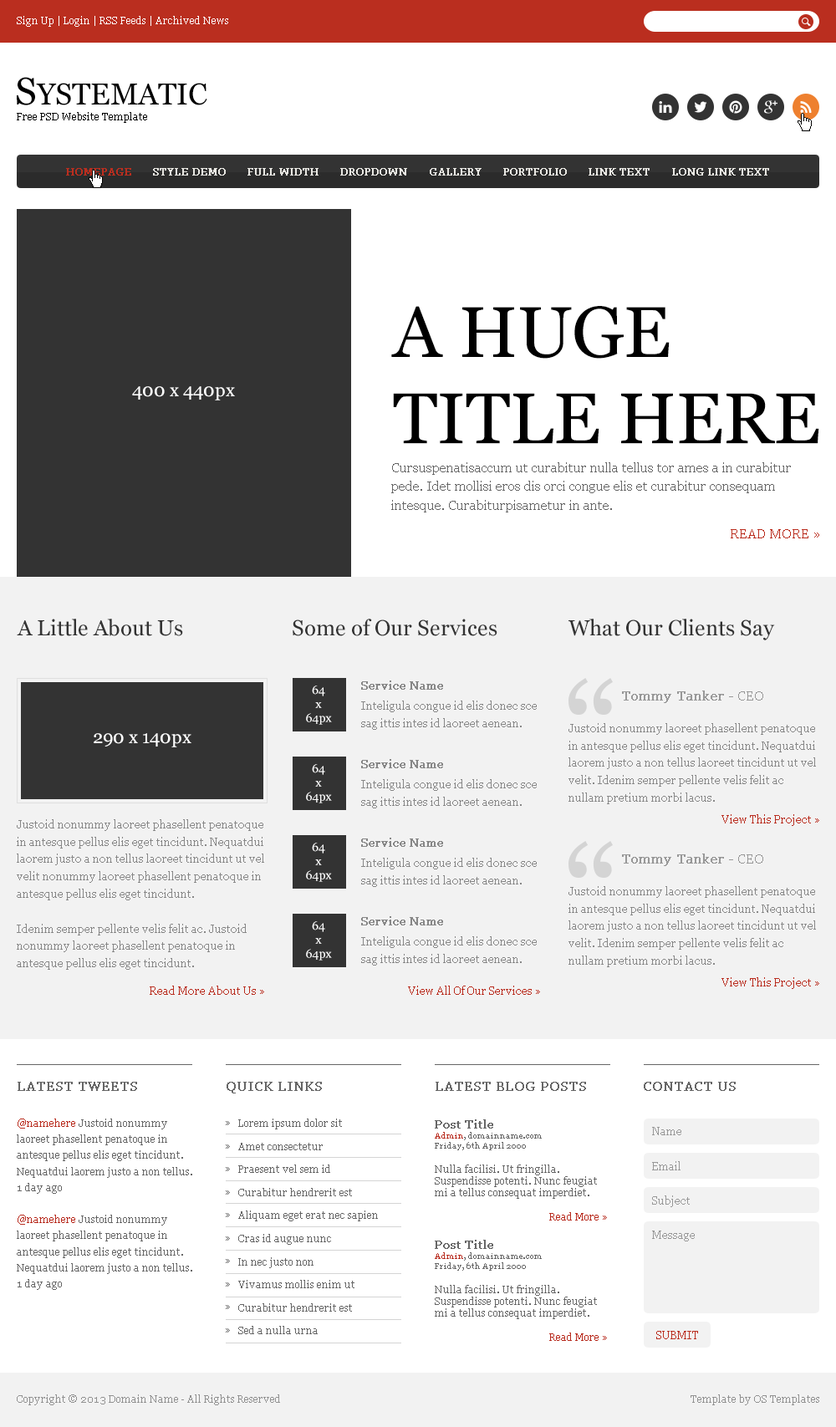
<style>
.page{position:relative;width:836px;height:1427px;background:#ffffff}
.page>*{position:absolute;margin:0}
.t1{font:10px "Georgia";color:#ffffff}
.t2{font:30.1px "Georgia";color:#000000}
.t3{font:38.4px "Georgia";color:#000000}
.t4{font:10px "Georgia";color:#000000}
.t5{font:10px "Georgia";color:#ba2e1f;font-weight:bold}
.t6{font:10px "Georgia";color:#e9e8e3;font-weight:bold}
.t7{font:71.9px/86.3px "Georgia";color:#000000}
.t8{font:18.4px "Georgia";color:#ffffff}
.t9{font:13.4px/18.7px "Georgia";color:#666666}
.t10{font:13.4px "Georgia";color:#ba2e1f}
.t11{font:21.7px "Georgia";color:#333333}
.t12{font:11.7px/14px "Georgia";color:#ffffff}
.t13{font:11.7px "Georgia";color:#878787;font-weight:bold}
.t14{font:10.9px/17.4px "Georgia";color:#878787}
.t15{font:13.4px "Georgia";color:#989898;font-weight:bold}
.t16{font:13.4px "Georgia";color:#989898}
.t17{font:10.9px/17.4px "Georgia";color:#888888}
.t18{font:10.9px "Georgia";color:#b92d1f}
.t19{font:13.4px "Georgia";color:#666666;font-weight:bold}
.t20{font:10px/16px "Georgia";color:#666666}
.t21{font:10px/16px "Georgia";color:#b92d1f}
.t22{font:10px/16px "Georgia";color:#b82c1f}
.t23{font:10.9px/23px "Georgia";color:#666666}
.t24{font:10px/23.1px "Georgia";color:#666666}
.t25{font:10px/12px "Georgia";color:#666666}
.t26{font:11.7px/14px "Georgia";color:#666666;font-weight:bold}
.t27{font:8.4px/10px "Georgia";color:#b82c1f}
.t28{font:8.4px/10px "Georgia";color:#666666}
.t29{font:10px/12px "Georgia";color:#b82c1f}
.t30{font:10.9px "Georgia";color:#989898}
.t31{font:10.9px "Georgia";color:#ba2e1f}
.t32{font:10px "Georgia";color:#919191}
</style>
<div class="page">
<p class="t1" style="left:17px;top:16px;width:211px;height:11px">Sign Up | Login | RSS Feeds | Archived News</p>
<p class="t2" style="left:17px;top:77px;width:190px;height:28px"><span class="t3">S</span>YSTEMATIC</p>
<p class="t4" style="left:17px;top:112px;width:130px;height:11px">Free PSD Website Template</p>
<p class="t5" style="left:66px;top:168px;width:65px;height:8px">HOMEPAGE</p>
<p class="t6" style="left:153px;top:168px;width:73px;height:8px">STYLE DEMO</p>
<p class="t6" style="left:247px;top:168px;width:71px;height:8px">FULL WIDTH</p>
<p class="t6" style="left:340px;top:168px;width:67px;height:8px">DROPDOWN</p>
<p class="t6" style="left:430px;top:168px;width:51px;height:8px">GALLERY</p>
<p class="t6" style="left:503px;top:168px;width:64px;height:8px">PORTFOLIO</p>
<p class="t6" style="left:588px;top:168px;width:61px;height:8px">LINK TEXT</p>
<p class="t6" style="left:672px;top:168px;width:97px;height:8px">LONG LINK TEXT</p>
<p class="t7" style="left:391px;top:306px;width:428px;height:138px">A HUGE TITLE HERE</p>
<p class="t8" style="left:132px;top:386px;width:103px;height:14px">400 x 440px</p>
<p class="t9" style="left:391px;top:462px;width:400px;height:50px">Cursuspenatisaccum ut curabitur nulla tellus tor ames a in curabitur pede. Idet mollisi eros dis orci congue elis et curabitur consequam intesque. Curabiturpisametur in ante.</p>
<p class="t10" style="left:730px;top:529px;width:89px;height:9px">READ MORE »</p>
<p class="t11" style="left:17px;top:618px;width:166px;height:18px">A Little About Us</p>
<p class="t11" style="left:293px;top:618px;width:204px;height:18px">Some of Our Services</p>
<p class="t11" style="left:568px;top:618px;width:207px;height:22px">What Our Clients Say</p>
<p class="t12" style="left:306px;top:685px;width:26px;height:40px;text-align:center">64<br>x<br>64px</p>
<p class="t13" style="left:361px;top:680px;width:82px;height:10px">Service Name</p>
<p class="t14" style="left:361px;top:700px;width:176px;height:30px">Inteligula congue id elis donec sce sag ittis intes id laoreet aenean.</p>
<p class="t15" style="left:622px;top:690px;width:141px;height:13px">Tommy Tanker<span class="t16"> - CEO</span></p>
<p class="t17" style="left:568px;top:723px;width:248px;height:81px">Justoid nonummy laoreet phasellent penatoque in antesque pellus elis eget tincidunt. Nequatdui laorem justo a non tellus laoreet tincidunt ut vel velit. Idenim semper pellente velis felit ac nullam pretium morbi lacus.</p>
<p class="t8" style="left:94px;top:733px;width:97px;height:14px">290 x 140px</p>
<p class="t13" style="left:361px;top:759px;width:82px;height:9px">Service Name</p>
<p class="t12" style="left:306px;top:764px;width:26px;height:39px;text-align:center">64<br>x<br>64px</p>
<p class="t14" style="left:361px;top:779px;width:176px;height:29px">Inteligula congue id elis donec sce sag ittis intes id laoreet aenean.</p>
<p class="t14" style="left:17px;top:819px;width:247px;height:151px">Justoid nonummy laoreet phasellent penatoque in antesque pellus elis eget tincidunt. Nequatdui laorem justo a non tellus laoreet tincidunt ut vel velit nonummy laoreet phasellent penatoque in antesque pellus elis eget tincidunt.<br><br>Idenim semper pellente velis felit ac. Justoid nonummy laoreet phasellent penatoque in antesque pellus elis eget tincidunt.</p>
<p class="t18" style="left:721px;top:814px;width:98px;height:12px">View This Project »</p>
<p class="t12" style="left:306px;top:842px;width:26px;height:40px;text-align:center">64<br>x<br>64px</p>
<p class="t13" style="left:361px;top:837px;width:82px;height:10px">Service Name</p>
<p class="t14" style="left:361px;top:858px;width:176px;height:29px">Inteligula congue id elis donec sce sag ittis intes id laoreet aenean.</p>
<p class="t15" style="left:622px;top:853px;width:141px;height:13px">Tommy Tanker<span class="t16"> - CEO</span></p>
<p class="t17" style="left:568px;top:886px;width:248px;height:81px">Justoid nonummy laoreet phasellent penatoque in antesque pellus elis eget tincidunt. Nequatdui laorem justo a non tellus laoreet tincidunt ut vel velit. Idenim semper pellente velis felit ac nullam pretium morbi lacus.</p>
<p class="t13" style="left:361px;top:916px;width:82px;height:9px">Service Name</p>
<p class="t12" style="left:306px;top:921px;width:26px;height:39px;text-align:center">64<br>x<br>64px</p>
<p class="t14" style="left:361px;top:936px;width:176px;height:29px">Inteligula congue id elis donec sce sag ittis intes id laoreet aenean.</p>
<p class="t18" style="left:721px;top:977px;width:98px;height:12px">View This Project »</p>
<p class="t18" style="left:150px;top:985px;width:114px;height:10px">Read More About Us »</p>
<p class="t18" style="left:408px;top:985px;width:132px;height:10px">View All Of Our Services »</p>
<p class="t19" style="left:18px;top:1082px;width:119px;height:9px">LATEST TWEETS</p>
<p class="t19" style="left:227px;top:1082px;width:95px;height:11px">QUICK LINKS</p>
<p class="t19" style="left:435px;top:1082px;width:151px;height:9px">LATEST BLOG POSTS</p>
<p class="t19" style="left:644px;top:1082px;width:92px;height:9px">CONTACT US</p>
<p class="t20" style="left:17px;top:1118px;width:175px;height:172px"><span class="t21">@namehere</span> Justoid nonummy laoreet phasellent penatoque in antesque pellus elis eget tincidunt. Nequatdui laorem justo a non tellus.<br>1 day ago<br><br><span class="t22">@namehere</span> Justoid nonummy laoreet phasellent penatoque in antesque pellus elis eget tincidunt. Nequatdui laorem justo a non tellus.<br>1 day ago</p>
<p class="t23" style="left:226px;top:1121px;width:4px;height:211px">»<br>»<br>»<br>»<br>»<br>»<br>»<br>»<br>»<br>»</p>
<p class="t24" style="left:238px;top:1118px;width:140px;height:216px">Lorem ipsum dolor sit<br>Amet consectetur<br>Praesent vel sem id<br>Curabitur hendrerit est<br>Aliquam eget erat nec sapien<br>Cras id augue nunc<br>In nec justo non<br>Vivamus mollis enim ut<br>Curabitur hendrerit est<br>Sed a nulla urna</p>
<p class="t25" style="left:435px;top:1119px;width:172px;height:222px"><span class="t26">Post Title<br></span><span class="t27">Admin</span><span class="t28">, domainname.com<br>Friday, 6th April 2000<br></span><br>Nulla facilisi. Ut fringilla. Suspendisse potenti. Nunc feugiat mi a tellus consequat imperdiet.<br><br><span class="t29">Read More »<br></span><span class="t26"><br>Post Title<br></span><span class="t27">Admin</span><span class="t28">, domainname.com<br>Friday, 6th April 2000<br></span><br>Nulla facilisi. Ut fringilla. Suspendisse potenti. Nunc feugiat mi a tellus consequat imperdiet.<br><br><span class="t29">Read More »</span></p>
<p class="t30" style="left:652px;top:1127px;width:29px;height:8px">Name</p>
<p class="t30" style="left:652px;top:1161px;width:28px;height:9px">Email</p>
<p class="t30" style="left:652px;top:1195px;width:38px;height:12px">Subject</p>
<p class="t30" style="left:652px;top:1230px;width:43px;height:11px">Message</p>
<p class="t31" style="left:656px;top:1331px;width:42px;height:8px">SUBMIT</p>
<p class="t32" style="left:17px;top:1394px;width:263px;height:11px">Copyright © 2013 Domain Name - All Rights Reserved</p>
<p class="t32" style="left:690px;top:1394px;width:129px;height:11px">Template by OS Templates</p>
</div>
